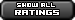
<style>
.page{position:relative;width:75px;height:20px}
.page>*{position:absolute;margin:0}
.t1{font:5.6px "04b09";color:#fefefe}
.t2{font:8px "04b09";color:#fdfcfc}
</style>
<div class="page">
<p class="t1" style="left:17px;top:3px;width:38px;height:4px">SHOW ALL</p>
<p class="t2" style="left:15px;top:10px;width:44px;height:5px">RATINGS</p>
</div>
